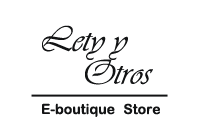
<style>
.page{position:relative;width:199px;height:134px;background:#ffffff}
.page>*{position:absolute;margin:0}
.t1{font:36px "Vivaldii";color:#121314}
.t2{font:14px "ArialRoundedMTBold";color:#121314}
</style>
<div class="page">
<p class="t1" style="left:42px;top:25px;width:86px;height:35px">Lety y</p>
<p class="t1" style="left:85px;top:59px;width:68px;height:26px">Otros</p>
<p class="t2" style="left:42px;top:103px;width:73px;height:14px">E-boutique</p>
<p class="t2" style="left:124px;top:103px;width:36px;height:12px">Store</p>
</div>
